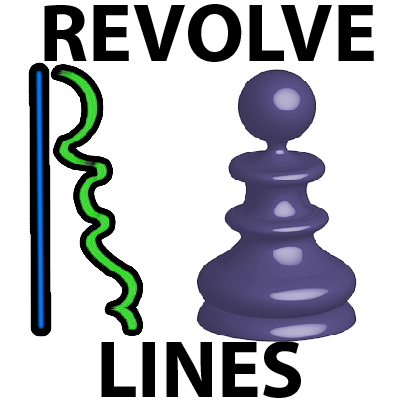
<style>
.page{position:relative;width:400px;height:400px;background:#ffffff}
.page>*{position:absolute;margin:0}
.t1{font:82.4px "MyriadPro-Bold";color:#000000}
.t2{font:81.5px "MyriadPro-Bold";color:#000000}
</style>
<div class="page">
<p class="t1" style="left:44px;top:4px;width:330px;height:58px">REVOLVE</p>
<p class="t2" style="left:101px;top:341px;width:200px;height:57px">LINES</p>
</div>
